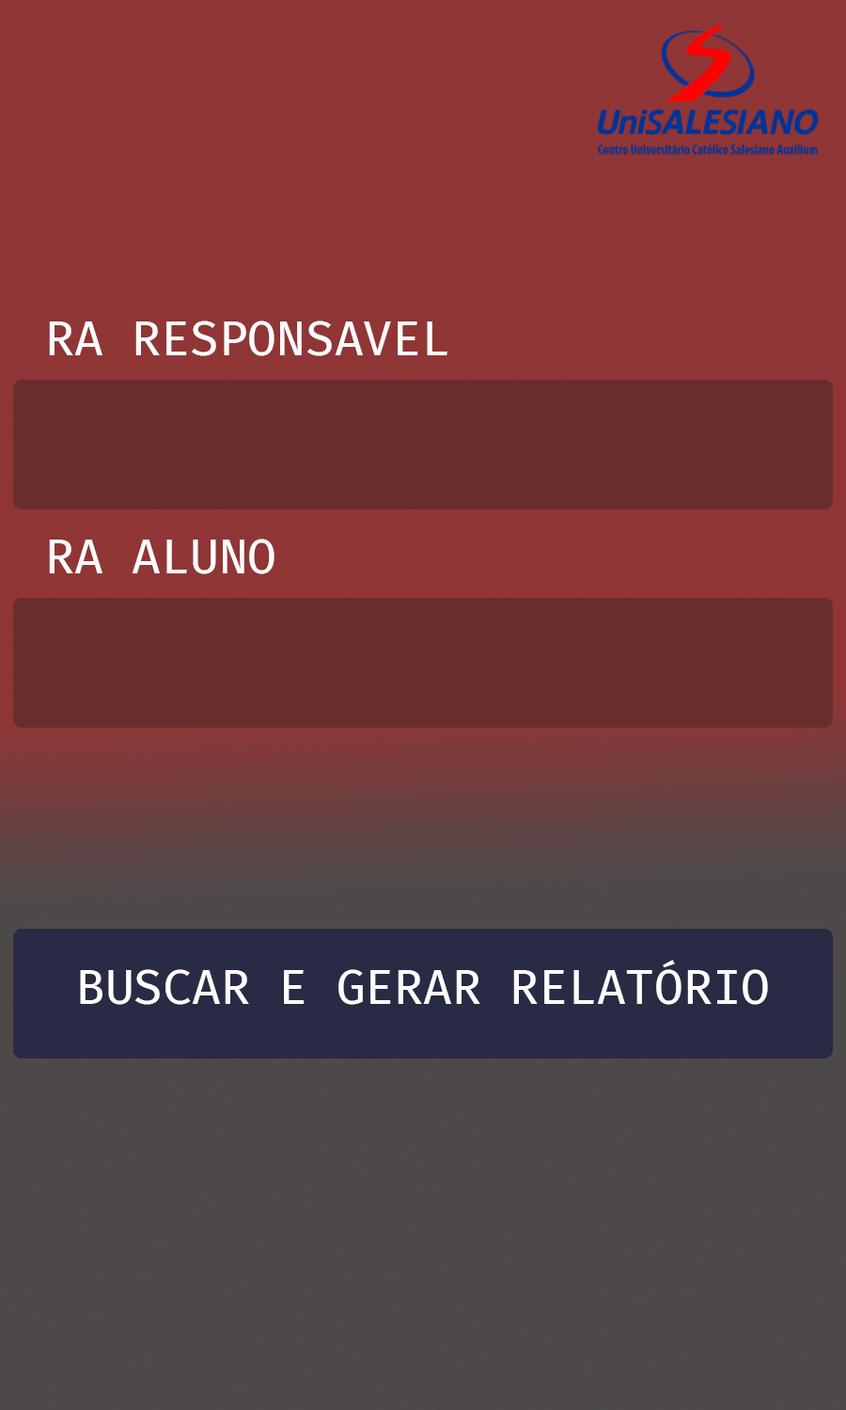
<style>
.page{position:relative;width:846px;height:1410px}
.page>*{position:absolute;margin:0}
.t1{font:47px "FiraCode-Retina";color:#fefefe}
</style>
<div class="page">
<p class="t1" style="left:49px;top:320px;width:398px;height:36px">RA RESPONSAVEL</p>
<p class="t1" style="left:49px;top:539px;width:225px;height:35px">RA ALUNO</p>
<p class="t1" style="left:80px;top:960px;width:688px;height:45px">BUSCAR E GERAR RELATÓRIO</p>
</div>
